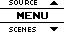
<style>
.page{position:relative;width:64px;height:32px;background:#ffffff}
.page>*{position:absolute;margin:0}
.t1{font:8px "04b03";color:#000000;scale:1.06 1}
.t2{font:14px "ArcadeClassic";color:#000000;scale:1.05 1}
</style>
<div class="page">
<p class="t1" style="left:9px;top:0px;width:28px;height:5px">SOURCE</p>
<p class="t2" style="left:17px;top:12px;width:31px;height:7px">MENU</p>
<p class="t1" style="left:9px;top:27px;width:27px;height:5px">SCENES</p>
</div>
